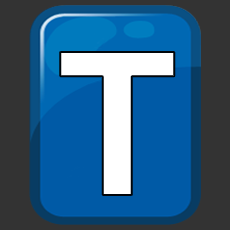
<style>
.page{position:relative;width:230px;height:230px;background:#333333}
.page>*{position:absolute;margin:0}
.t1{font:200px "Arial-BoldMT";color:#ffffff}
</style>
<div class="page">
<p class="t1" style="left:60px;top:52px;width:115px;height:143px">T</p>
</div>
